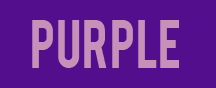
<style>
.page{position:relative;width:216px;height:88px;background:#530e8e}
.page>*{position:absolute;margin:0}
.t1{font:53.6px "Bebas";color:#c790b9;scale:0.91 1}
</style>
<div class="page">
<p class="t1" style="left:32px;top:20px;width:147px;height:48px">purple</p>
</div>
